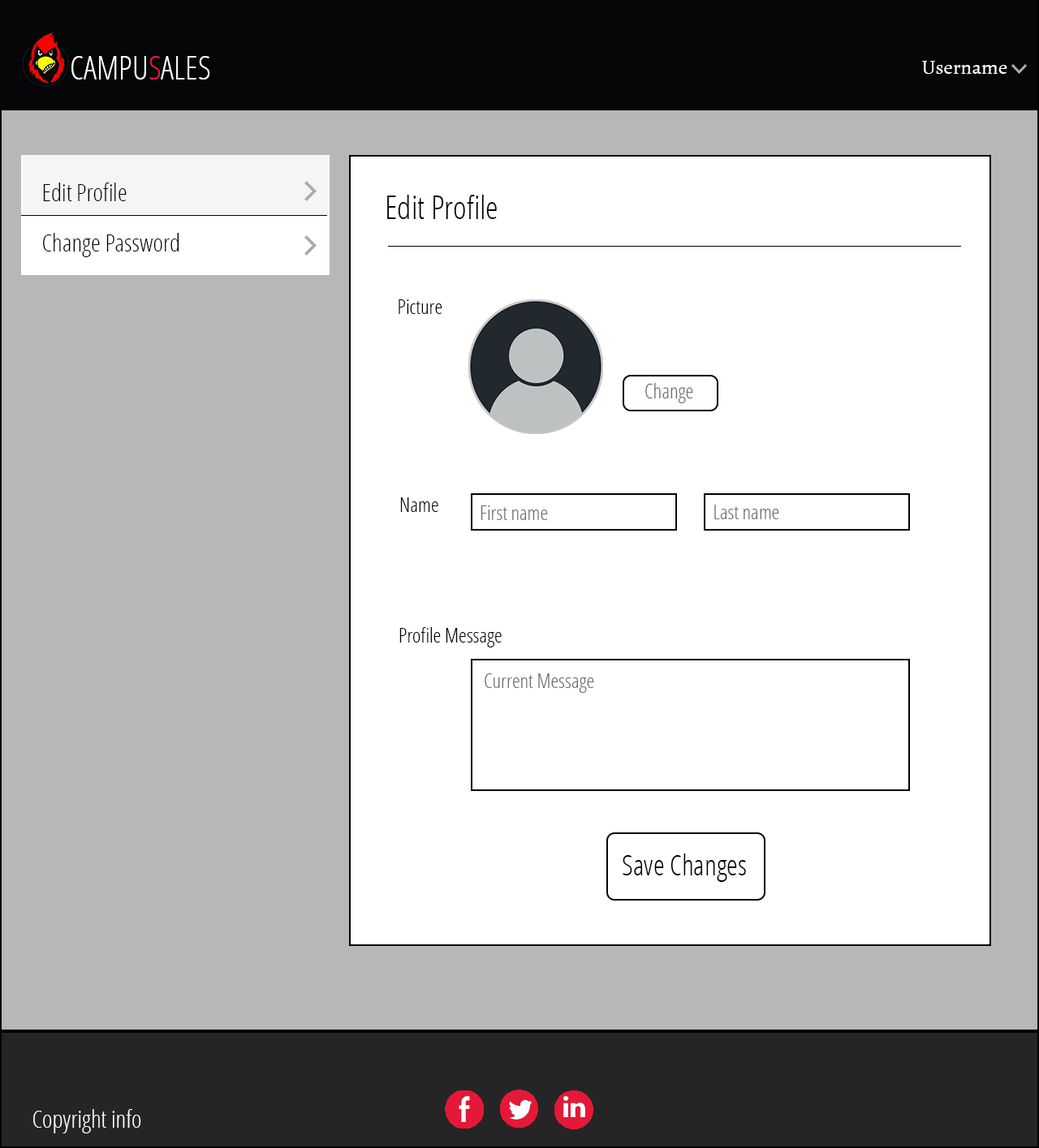
<style>
.page{position:relative;width:1039px;height:1148px;background:#ffffff}
.page>*{position:absolute;margin:0}
.t1{font:32.5px "OpenSans-CondensedLight";color:#fefeff;text-transform:uppercase}
.t2{font:32.5px "OpenSans-CondensedLight";color:#e51837;text-transform:uppercase}
.t3{font:20.3px "Alegreya-Regular";color:#ffffff}
.t4{font:24.3px "OpenSans-CondensedLight";color:#000000}
.t5{font:32.5px "OpenSans-CondensedLight";color:#050608}
.t6{font:20.3px "OpenSans-CondensedLight";color:#050608}
.t7{font:20.3px "OpenSans-CondensedLight";color:#707070}
.t8{font:28.4px "OpenSans-CondensedLight";color:#000000}
.t9{font:24.3px "OpenSans-CondensedLight";color:#ffffff}
</style>
<div class="page">
<p class="t1" style="left:71px;top:56px;width:139px;height:24px">Campu<span class="t2">s</span>ales</p>
<p class="t3" style="left:922px;top:61px;width:85px;height:14px">Username</p>
<p class="t4" style="left:43px;top:183px;width:84px;height:18px">Edit Profile</p>
<p class="t5" style="left:387px;top:195px;width:110px;height:24px">Edit Profile</p>
<p class="t4" style="left:43px;top:233px;width:136px;height:24px">Change Password</p>
<p class="t6" style="left:398px;top:299px;width:44px;height:15px">Picture</p>
<p class="t7" style="left:645px;top:382px;width:48px;height:22px">Change</p>
<p class="t6" style="left:400px;top:497px;width:38px;height:15px">Name</p>
<p class="t7" style="left:480px;top:506px;width:68px;height:14px">First name</p>
<p class="t7" style="left:714px;top:505px;width:65px;height:14px">Last name</p>
<p class="t6" style="left:399px;top:627px;width:102px;height:20px">Profile Message</p>
<p class="t7" style="left:484px;top:673px;width:110px;height:20px">Current Message</p>
<p class="t8" style="left:622px;top:854px;width:124px;height:28px">Save Changes</p>
<p class="t9" style="left:33px;top:1109px;width:108px;height:25px">Copyright info</p>
</div>
